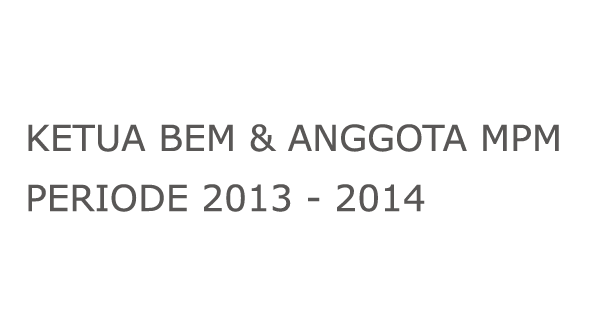
<style>
.page{position:relative;width:592px;height:320px;background:#ffffff}
.page>*{position:absolute;margin:0}
.t1{font:36px/60px "MSReferenceSansSerif";color:#595756}
</style>
<div class="page">
<p class="t1" style="left:28px;top:124px;width:531px;height:88px">KETUA BEM &amp; ANGGOTA MPM<br>PERIODE 2013 - 2014</p>
</div>
